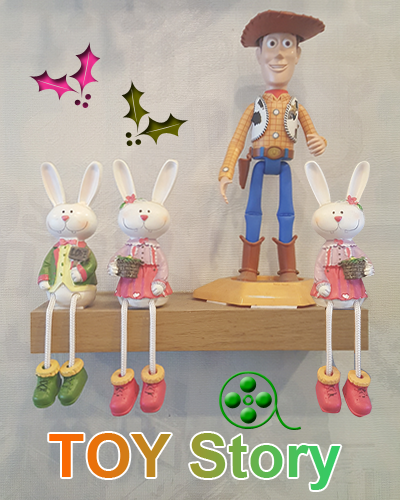
<style>
.page{position:relative;width:400px;height:500px}
.page>*{position:absolute;margin:0}
.t1{font:60px "Arial-BoldMT"}
</style>
<div class="page">
<p class="t1" style="left:49px;top:433px;width:292px;height:57px">TOY Story</p>
</div>
